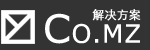
<style>
.page{position:relative;width:150px;height:50px;background:#333333}
.page>*{position:absolute;margin:0}
.t1{font:25.2px "MSReferenceSansSerif";color:#ffffff;font-weight:bold}
.t2{font:39px "MSReferenceSansSerif";color:#ffffff;font-weight:bold}
.t3{font:12.1px "STHeitiSC-Light";color:#ffffff;font-weight:bold}
</style>
<div class="page">
<p class="t1" style="left:45px;top:13px;width:95px;height:31px"><span class="t2">C</span>O.MZ</p>
<p class="t3" style="left:92px;top:9px;width:49px;height:12px">解决方案</p>
</div>
